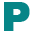
<style>
.page{position:relative;width:32px;height:32px;background:#068587}
.page>*{position:absolute;margin:0}
.t1{font:40.4px "Arial-Black";letter-spacing:-0.025em;color:#068587;scale:1.05 1}
</style>
<div class="page">
<p class="t1" style="left:4px;top:2px;width:26px;height:29px">P</p>
</div>
